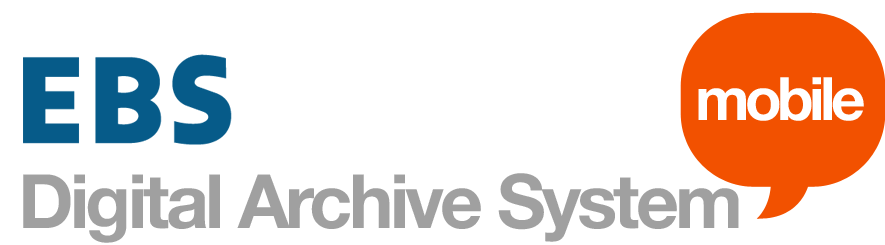
<style>
.page{position:relative;width:885px;height:245px;background:#ffffff}
.page>*{position:absolute;margin:0}
.t1{font:60px "Helvetica75-Bold";letter-spacing:-0.075em;color:#ffffff}
.t2{font:75px "Helvetica75-Bold";letter-spacing:-0.05em;color:#a0a0a0}
</style>
<div class="page">
<p class="t1" style="left:698px;top:77px;width:166px;height:44px">mobile</p>
<p class="t2" style="left:23px;top:173px;width:716px;height:70px">Digital Archive System</p>
</div>
